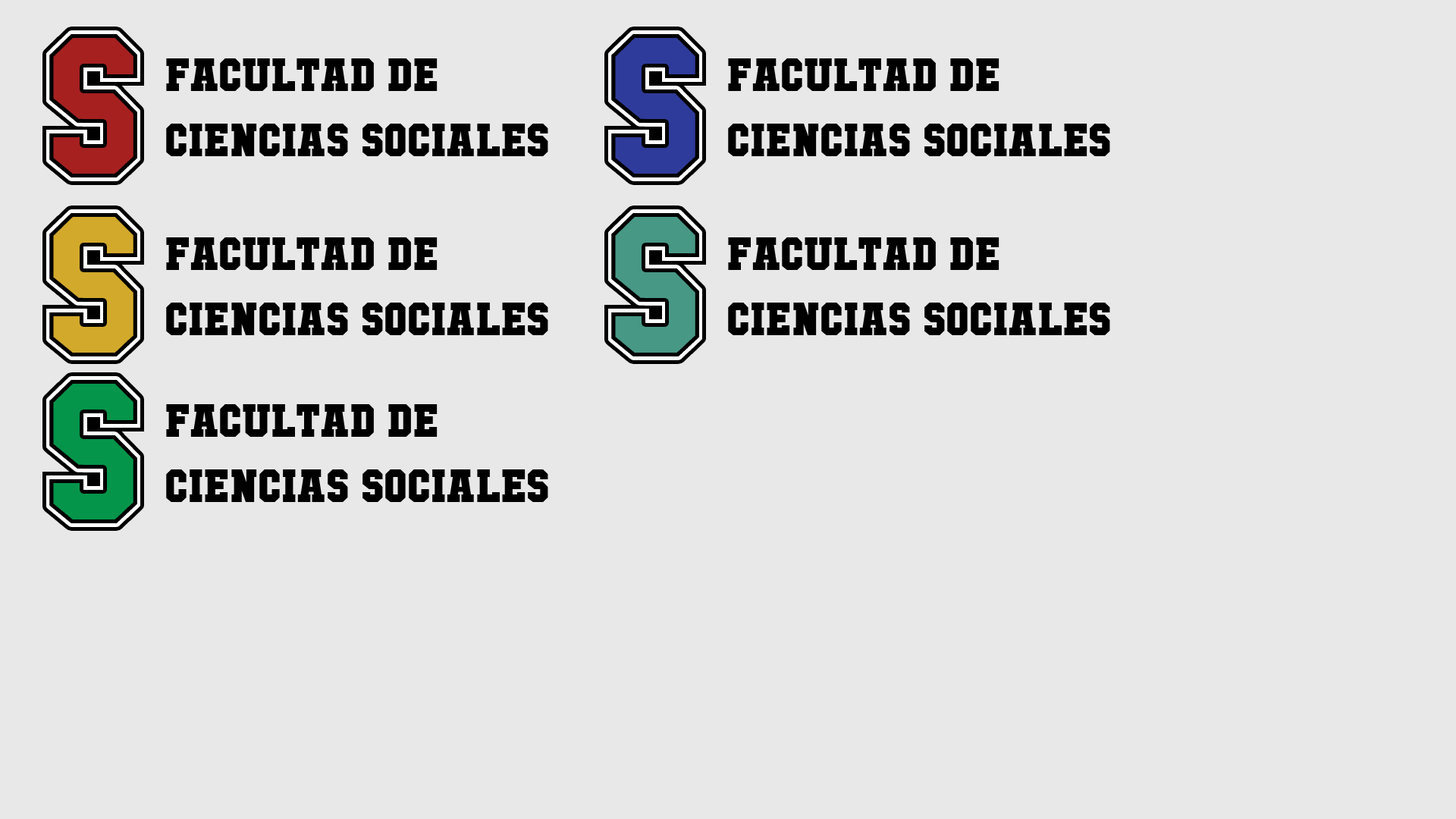
<style>
.page{position:relative;width:1456px;height:819px;background:#e8e8e8}
.page>*{position:absolute;margin:0}
.t1{font:54.6px "MutantAcademyBB";color:#000000}
</style>
<div class="page">
<p class="t1" style="left:166px;top:58px;width:382px;height:98px">facultad de<br>Ciencias sociales</p>
<p class="t1" style="left:728px;top:58px;width:382px;height:98px">facultad de<br>Ciencias sociales</p>
<p class="t1" style="left:166px;top:237px;width:382px;height:98px">facultad de<br>Ciencias sociales</p>
<p class="t1" style="left:728px;top:237px;width:382px;height:98px">facultad de<br>Ciencias sociales</p>
<p class="t1" style="left:166px;top:404px;width:382px;height:98px">facultad de<br>Ciencias sociales</p>
</div>
